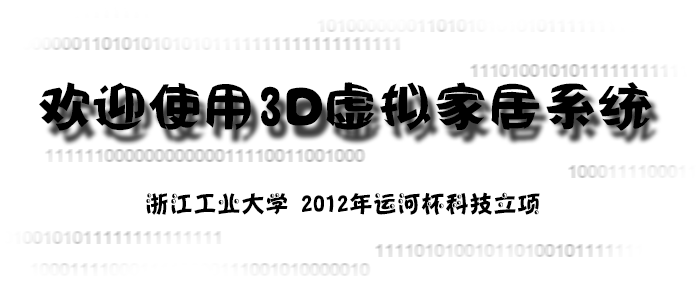
<style>
.page{position:relative;width:700px;height:300px;background:#ffffff}
.page>*{position:absolute;margin:0}
.t1{font:55px "HYm4gj";color:#000000}
.t2{font:24px "HYo3gj";color:#000000}
</style>
<div class="page">
<p class="t1" style="left:39px;top:82px;width:613px;height:49px">欢迎使用3D虚拟家居系统</p>
<p class="t2" style="left:146px;top:192px;width:394px;height:23px">浙江工业大学 2012年运河杯科技立项</p>
</div>
